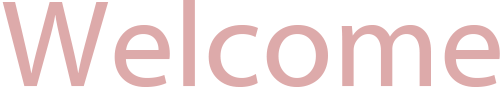
<style>
.page{position:relative;width:502px;height:89px;background:#ffffff}
.page>*{position:absolute;margin:0}
.t1{font:124.3px "MyriadWebPro";color:#ddaaaa}
</style>
<div class="page">
<p class="t1" style="left:2px;top:0px;width:498px;height:87px">Welcome</p>
</div>
